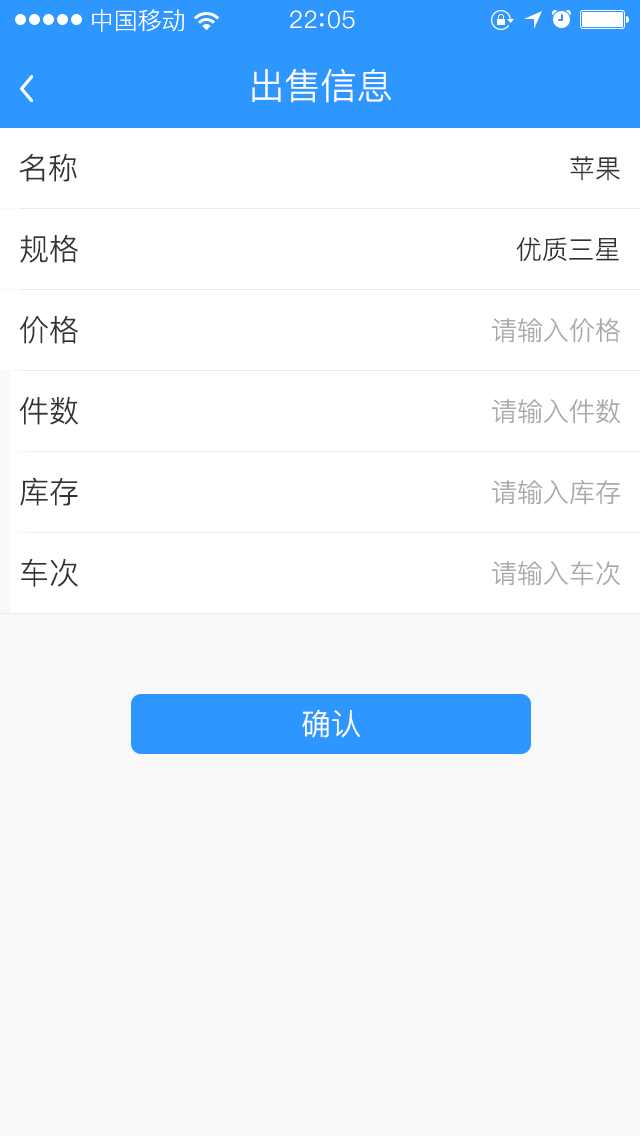
<style>
.page{position:relative;width:640px;height:1136px;background:#f9f9f9}
.page>*{position:absolute;margin:0}
.t1{font:24px "PingFang-SC-Regular";color:#ffffff}
.t2{font:24px "PingFang-SC-Regular";letter-spacing:0.03em;color:#ffffff}
.t3{font:36px "PingFang-SC-Regular";color:#ffffff}
.t4{font:30px "PingFang-SC-Regular";color:#333333}
.t5{font:26px "PingFang-SC-Regular";color:#333333}
.t6{font:26px "PingFang-SC-Regular";color:#aaaaaa}
.t7{font:30px "PingFang-SC-Regular";color:#ffffff}
</style>
<div class="page">
<p class="t1" style="left:92px;top:9px;width:92px;height:23px">中国移动</p>
<p class="t2" style="left:290px;top:10px;width:65px;height:19px">22 05</p>
<p class="t3" style="left:252px;top:68px;width:139px;height:35px">出售信息</p>
<p class="t4" style="left:19px;top:153px;width:58px;height:29px">名称</p>
<p class="t5" style="left:570px;top:156px;width:50px;height:25px">苹果</p>
<p class="t4" style="left:20px;top:234px;width:58px;height:29px">规格</p>
<p class="t5" style="left:516px;top:237px;width:103px;height:25px">优质三星</p>
<p class="t4" style="left:20px;top:315px;width:58px;height:29px">价格</p>
<p class="t6" style="left:492px;top:318px;width:128px;height:25px">请输入价格</p>
<p class="t4" style="left:19px;top:396px;width:59px;height:29px">件数</p>
<p class="t6" style="left:492px;top:399px;width:129px;height:25px">请输入件数</p>
<p class="t4" style="left:20px;top:477px;width:58px;height:29px">库存</p>
<p class="t6" style="left:492px;top:480px;width:128px;height:25px">请输入库存</p>
<p class="t4" style="left:21px;top:558px;width:57px;height:29px">车次</p>
<p class="t6" style="left:492px;top:561px;width:128px;height:25px">请输入车次</p>
<p class="t7" style="left:302px;top:709px;width:58px;height:29px">确认</p>
</div>
